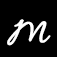
<style>
.page{position:relative;width:57px;height:57px;background:#000000}
.page>*{position:absolute;margin:0}
.t1{font:37px "Allura-Regular";color:#ffffff;font-weight:bold}
</style>
<div class="page">
<p class="t1" style="left:7px;top:19px;width:44px;height:27px">M</p>
</div>
